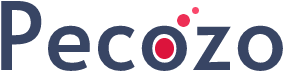
<style>
.page{position:relative;width:285px;height:74px;background:#ffffff}
.page>*{position:absolute;margin:0}
.t1{font:94px "Alata-Regular";color:#384564}
</style>
<div class="page">
<p class="t1" style="left:1px;top:0px;width:282px;height:71px">Pecozo</p>
</div>
